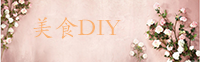
<style>
.page{position:relative;width:200px;height:62px}
.page>*{position:absolute;margin:0}
.t1{font:24px "STKaiti";color:#fab272}
</style>
<div class="page">
<p class="t1" style="left:33px;top:17px;width:88px;height:22px">美食DIY</p>
</div>
